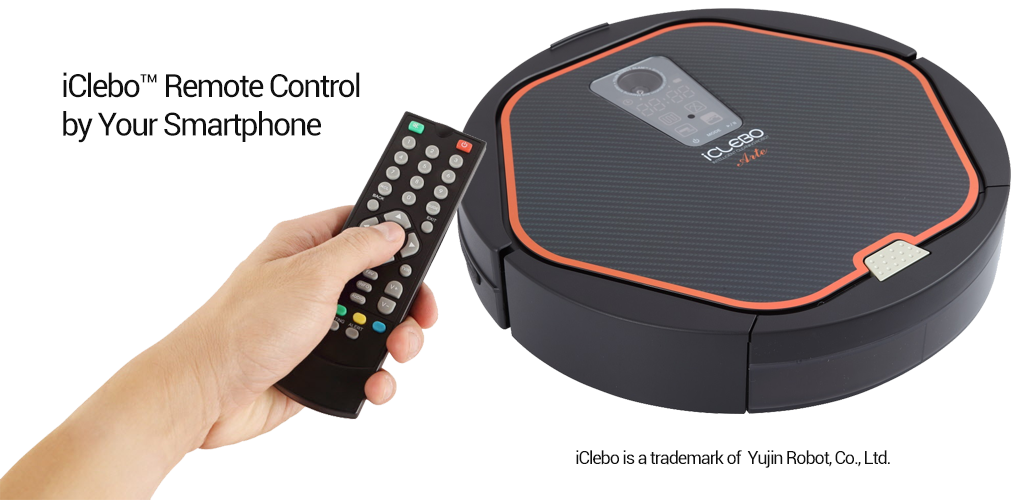
<style>
.page{position:relative;width:1024px;height:500px;background:#ffffff}
.page>*{position:absolute;margin:0}
.t1{font:32px "Roboto-Regular";letter-spacing:-0.06em;color:#101010}
.t2{font:18px "Roboto-Regular";letter-spacing:-0.06em;color:#101010}
</style>
<div class="page">
<p class="t1" style="left:63px;top:72px;width:297px;height:71px">iClebo™ Remote Control<br>by Your Smartphone</p>
<p class="t2" style="left:576px;top:450px;width:314px;height:18px">iClebo is a trademark of  Yujin Robot, Co., Ltd.</p>
</div>
